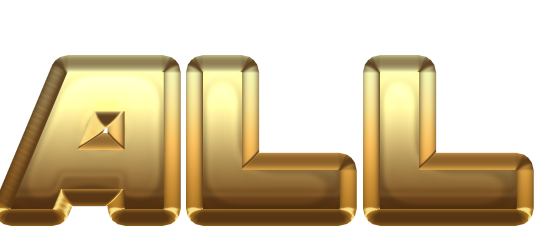
<style>
.page{position:relative;width:539px;height:238px;background:#ffffff}
.page>*{position:absolute;margin:0}
.t1{font:200px "Diagon";letter-spacing:0.15em}
</style>
<div class="page">
<p class="t1" style="left:10px;top:72px;width:507px;height:137px">ALL</p>
</div>
